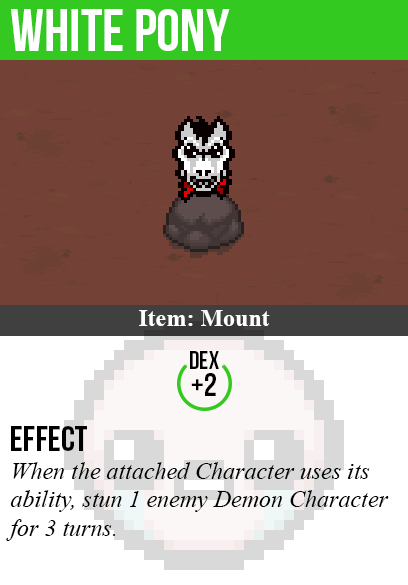
<style>
.page{position:relative;width:408px;height:585px;background:#734136}
.page>*{position:absolute;margin:0}
.t1{font:60px "BebasNeue";color:#ffffff}
.t2{font:24px "TimesNewRomanPS-BoldMT";color:#ffffff}
.t3{font:25px "BebasNeue";color:#000000}
.t4{font:32px "BebasNeue";color:#000000}
.t5{font:36px "BebasNeue";color:#000000}
.t6{font:24px "TimesNewRomanPS-ItalicMT";color:#000000}
</style>
<div class="page">
<p class="t1" style="left:11px;top:9px;width:219px;height:42px">white pony</p>
<p class="t2" style="left:139px;top:310px;width:131px;height:16px">Item: Mount</p>
<p class="t3" style="left:190px;top:351px;width:29px;height:18px">dex</p>
<p class="t4" style="left:191px;top:373px;width:25px;height:23px">+2</p>
<p class="t5" style="left:11px;top:426px;width:76px;height:25px">Effect</p>
<p class="t6" style="left:6px;top:462px;width:383px;height:79px">When the attached Character uses its<br>ability, stun 1 enemy Demon Character<br>for 3 turns.</p>
</div>
